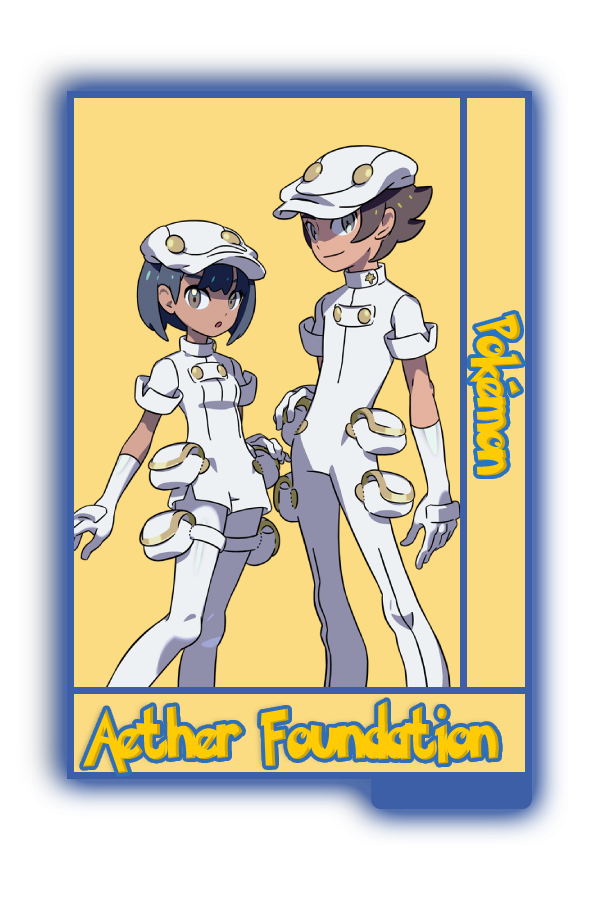
<style>
.page{position:relative;width:600px;height:900px;background:#fbdc83}
.page>*{position:absolute;margin:0}
.t1{font:48.8px "PokemonSolidNormal";color:#ffcb05;scale:0.8 1}
.t2{font:54.6px "PokemonSolidNormal";color:#ffcb05;scale:0.82 1}
</style>
<div class="page">
<p class="t1" style="left:469px;top:313px;width:54px;height:163px;rotate:90deg">Pokémon</p>
<p class="t2" style="left:82px;top:701px;width:417px;height:72px">Aether Foundation</p>
</div>
